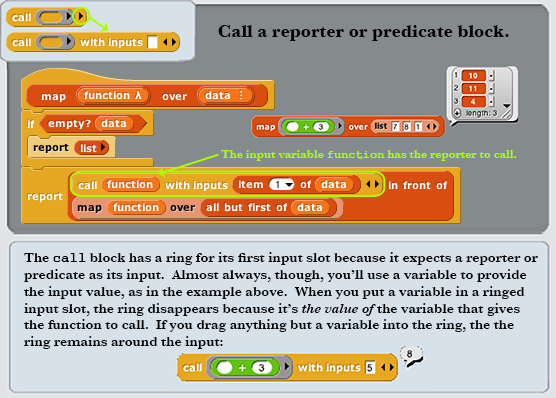
<style>
.page{position:relative;width:556px;height:398px;background:#d6e1ea}
.page>*{position:absolute;margin:0}
.t1{font:18px "Baskerville-Bold";color:#030100}
.t2{font:12px "Baskerville-SemiBold";color:#a8ff00}
.t3{font:12px "CourierHP-Bold";color:#a8ff00}
.t4{font:14px "Baskerville-SemiBold";color:#000000}
.t5{font:14px "CourierHP-Bold";color:#000000}
.t6{font:14px "Baskerville-SemiBoldItalic";color:#000000}
</style>
<div class="page">
<p class="t1" style="left:218px;top:25px;width:291px;height:16px">Call a reporter or predicate block.</p>
<p class="t2" style="left:221px;top:150px;width:296px;height:11px">The input variable <span class="t3">function</span> has the reporter to call.</p>
<p class="t4" style="left:24px;top:252px;width:514px;height:97px">The <span class="t5">call</span> block has a ring for its ﬁrst input slot because it expects a reporter or<br>predicate as its input.  Almost always, though, you’ll use a variable to provide<br>the input value, as in the example above.  When you put a variable in a ringed<br>input slot, the ring disappears because it’s <span class="t6">the value of </span>the variable that gives<br>the function to call.  If you drag anything but a variable into the ring, the the<br>ring remains around the input:</p>
</div>
